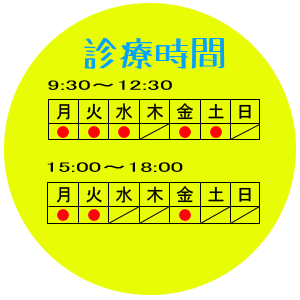
<style>
.page{position:relative;width:300px;height:300px;background:#e8fc05}
.page>*{position:absolute;margin:0}
.t1{font:36px "Tanuki-Permanent-Marker";color:#05a2fc}
.t2{font:14px "MS-PGothic";color:#000000;scale:1.83 1}
.t3{font:18px "MS-PGothic";color:#020202}
.t4{font:14px "MS-PGothic";color:#fd040b}
</style>
<div class="page">
<p class="t1" style="left:84px;top:38px;width:141px;height:31px">診療時間</p>
<p class="t2" style="left:48px;top:80px;width:124px;height:10px">9:30～12:30</p>
<p class="t3" style="left:56px;top:104px;width:14px;height:16px">月</p>
<p class="t3" style="left:86px;top:103px;width:16px;height:17px">火</p>
<p class="t3" style="left:116px;top:103px;width:16px;height:17px">水</p>
<p class="t3" style="left:147px;top:103px;width:16px;height:17px">木</p>
<p class="t3" style="left:176px;top:103px;width:17px;height:17px">金</p>
<p class="t3" style="left:208px;top:103px;width:16px;height:16px">土</p>
<p class="t3" style="left:239px;top:104px;width:12px;height:15px">日</p>
<p class="t4" style="left:57px;top:126px;width:12px;height:12px">●</p>
<p class="t4" style="left:88px;top:126px;width:12px;height:12px">●</p>
<p class="t4" style="left:118px;top:126px;width:12px;height:12px">●</p>
<p class="t4" style="left:179px;top:126px;width:12px;height:12px">●</p>
<p class="t4" style="left:210px;top:126px;width:12px;height:12px">●</p>
<p class="t2" style="left:47px;top:162px;width:136px;height:10px">15:00～18:00</p>
<p class="t3" style="left:56px;top:187px;width:14px;height:16px">月</p>
<p class="t3" style="left:86px;top:186px;width:16px;height:17px">火</p>
<p class="t3" style="left:116px;top:186px;width:16px;height:17px">水</p>
<p class="t3" style="left:147px;top:186px;width:16px;height:17px">木</p>
<p class="t3" style="left:176px;top:186px;width:17px;height:17px">金</p>
<p class="t3" style="left:208px;top:186px;width:16px;height:16px">土</p>
<p class="t3" style="left:239px;top:187px;width:12px;height:15px">日</p>
<p class="t4" style="left:57px;top:209px;width:12px;height:12px">●</p>
<p class="t4" style="left:88px;top:209px;width:12px;height:12px">●</p>
<p class="t4" style="left:179px;top:209px;width:12px;height:12px">●</p>
</div>
